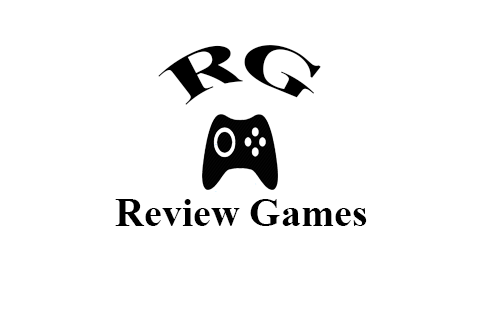
<style>
.page{position:relative;width:480px;height:320px;background:#ffffff}
.page>*{position:absolute;margin:0}
.t1{font:60px "TimesNewRomanPS-BoldMT";color:#000000}
.t2{font:40px "TimesNewRomanPS-BoldMT";color:#000000}
</style>
<div class="page">
<p class="t1" style="left:158px;top:45px;width:163px;height:60px">RG</p>
<p class="t2" style="left:115px;top:199px;width:252px;height:27px">Review Games</p>
</div>
